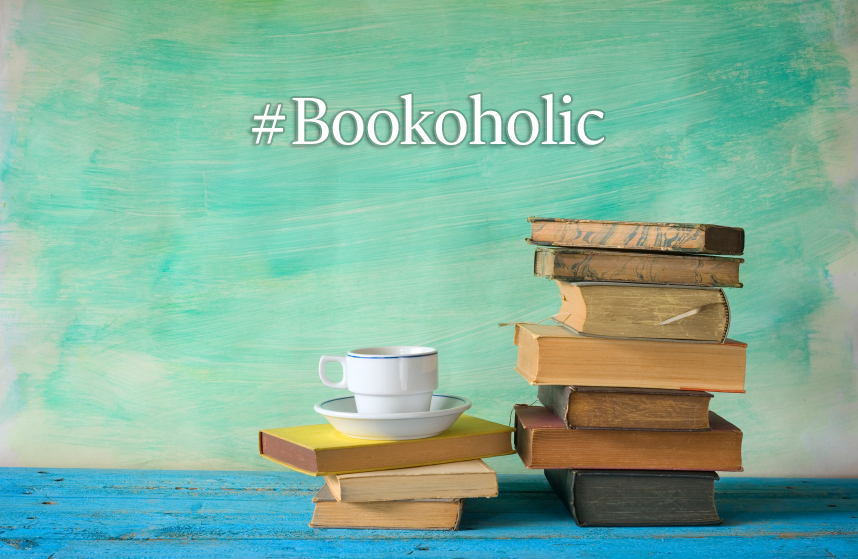
<style>
.page{position:relative;width:858px;height:559px}
.page>*{position:absolute;margin:0}
.t1{font:75px "SitkaBanner";color:#ffffff}
</style>
<div class="page">
<p class="t1" style="left:252px;top:93px;width:352px;height:52px">#Bookoholic</p>
</div>
